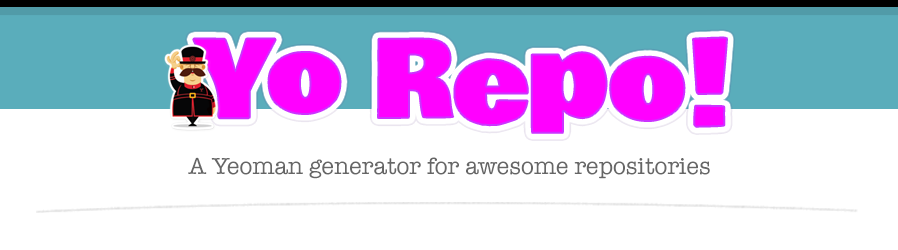
<style>
.page{position:relative;width:898px;height:250px;background:#ffffff}
.page>*{position:absolute;margin:0}
.t1{font:105.4px "BowlbyOne-Regular";color:#ff00ff}
.t2{font:105.4px "BowlbyOne-Regular";letter-spacing:-0.05em;color:#ff00ff}
.t3{font:99.9px "BowlbyOne-Regular";letter-spacing:-0.05em;color:#ff00ff}
.t4{font:105.4px "BowlbyOne-Regular";letter-spacing:0.025em;color:#ff00ff}
.t5{font:102.6px "BowlbyOne-Regular";color:#ff00ff}
.t6{font:116.5px "BowlbyOne-Regular";color:#ff00ff}
.t7{font:24px "AmericanTypewriter";color:#666666}
</style>
<div class="page">
<p class="t1" style="left:193px;top:37px;width:534px;height:96px"><span class="t2">Y</span><span class="t3">o </span><span class="t4">R</span>ep<span class="t5">o</span><span class="t6">!</span></p>
<p class="t7" style="left:188px;top:157px;width:522px;height:22px">A Yeoman generator for awesome repositories</p>
</div>
